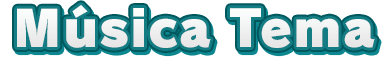
<style>
.page{position:relative;width:392px;height:58px;background:#ffffff}
.page>*{position:absolute;margin:0}
.t1{font:49.5px "RodinPro-UB";letter-spacing:0.014em;color:#efeff0}
</style>
<div class="page">
<p class="t1" style="left:17px;top:5px;width:358px;height:43px">Música Tema</p>
</div>
